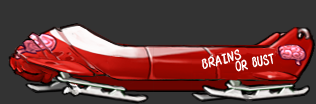
<style>
.page{position:relative;width:316px;height:104px;background:#333333}
.page>*{position:absolute;margin:0}
.t1{font:15.6px "MuYaoSoftbrush";color:#ffffff;text-transform:uppercase;scale:0.88 1}
.t2{font:15.7px "MuYaoSoftbrush";color:#ffffff;text-transform:uppercase;scale:0.74 1}
</style>
<div class="page">
<p class="t1" style="left:201px;top:49px;width:41px;height:20px;rotate:-15deg">BRAINS</p>
<p class="t2" style="left:235px;top:53px;width:39px;height:19px;rotate:-13deg">OR BUST</p>
</div>
